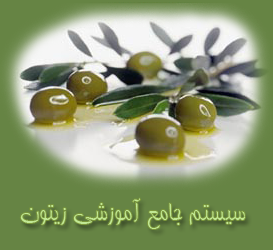
<style>
.page{position:relative;width:273px;height:250px;background:#668444}
.page>*{position:absolute;margin:0}
.t1{font:30px "BTabassom";color:#c1e894}
</style>
<div class="page">
<p class="t1" style="left:20px;top:198px;width:225px;height:31px">سيستم جامع آموزشي زيتون</p>
</div>
